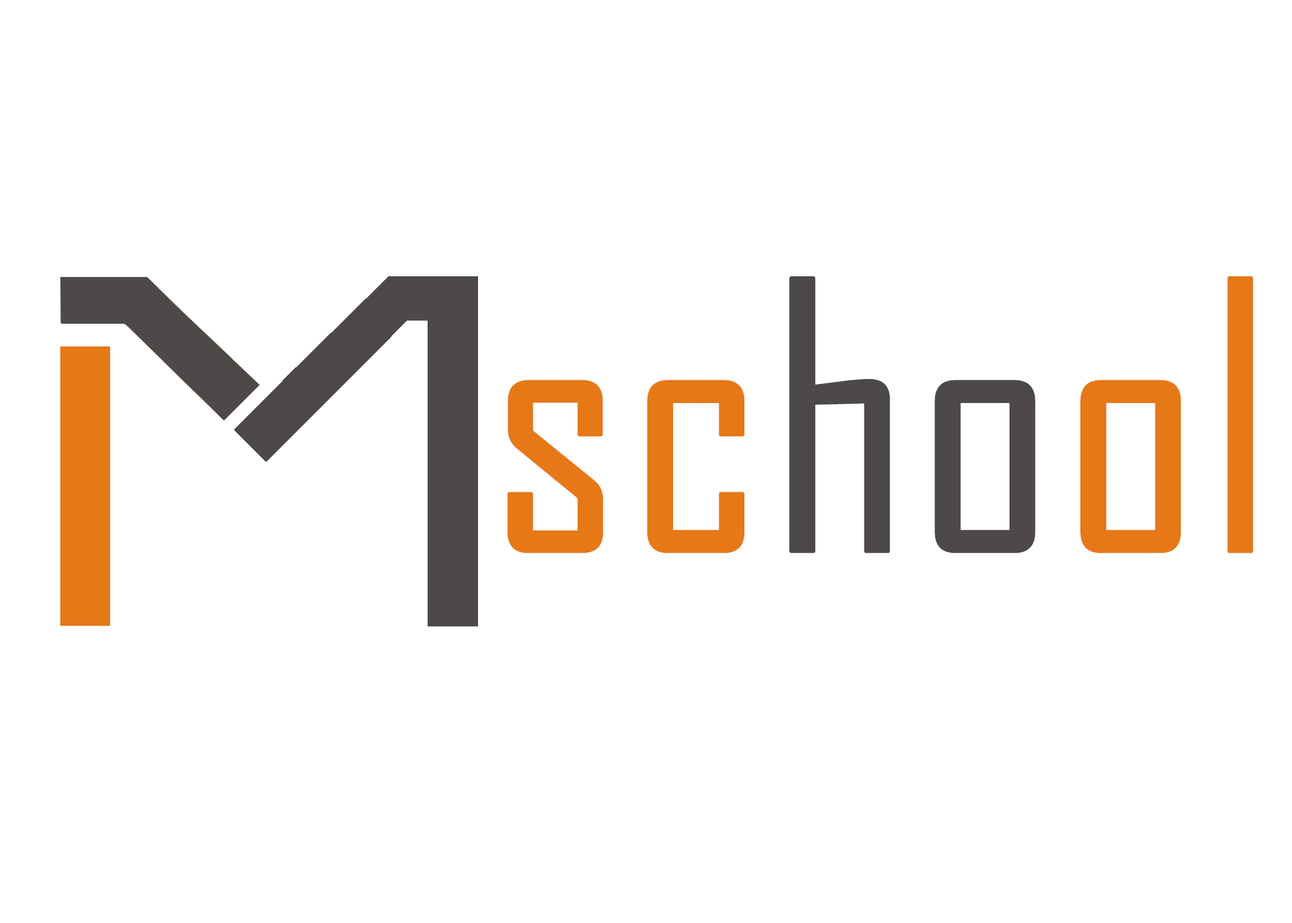
<style>
.page{position:relative;width:1292px;height:923px;background:#ffffff}
.page>*{position:absolute;margin:0}
.t1{font:358.9px "AgencyFB-Reg";color:#e67817;font-weight:bold}
.t2{font:358.9px "AgencyFB-Reg";color:#4d4948;font-weight:bold}
</style>
<div class="page">
<p class="t1" style="left:508px;top:276px;width:745px;height:277px">sc<span class="t2">ho</span>ol</p>
</div>
